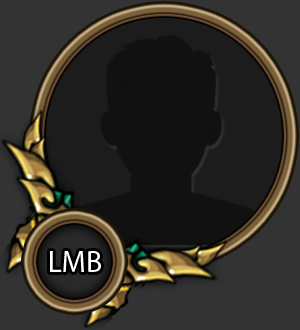
<style>
.page{position:relative;width:300px;height:330px;background:#333333}
.page>*{position:absolute;margin:0}
.t1{font:30px "MyriadPro-Regular";color:#ffffff}
</style>
<div class="page">
<p class="t1" style="left:50px;top:251px;width:51px;height:21px">LMB</p>
</div>
